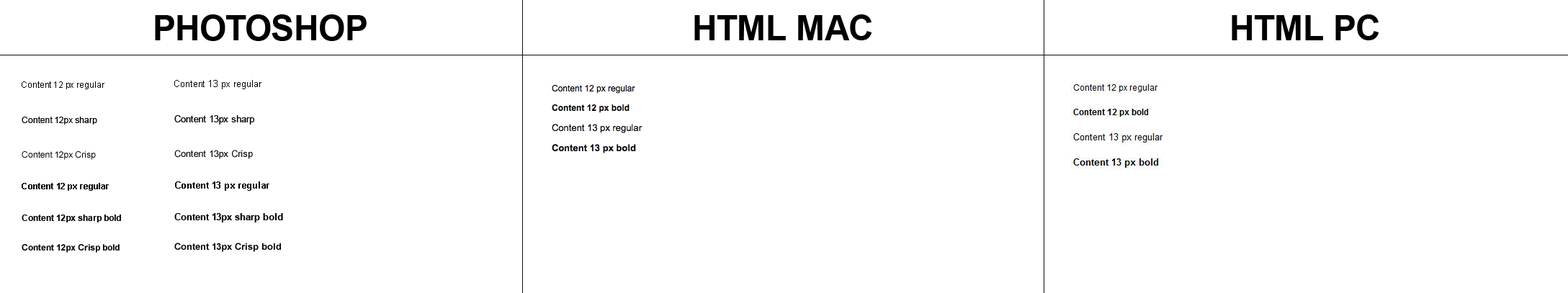
<style>
.page{position:relative;width:1568px;height:293px;background:#ffffff}
.page>*{position:absolute;margin:0}
.t1{font:34.6px "Arial-BoldMT";color:#000000}
.t2{font:8.6px "ArialMT";color:#000000}
.t3{font:9.4px "ArialMT";color:#000000}
.t4{font:8.6px "Arial-BoldMT";color:#000000}
.t5{font:9.4px "Arial-BoldMT";color:#000000}
</style>
<div class="page">
<p class="t1" style="left:155px;top:14px;width:212px;height:27px">PHOTOSHOP</p>
<p class="t1" style="left:694px;top:14px;width:178px;height:26px">HTML MAC</p>
<p class="t1" style="left:1232px;top:14px;width:147px;height:26px">HTML PC</p>
<p class="t2" style="left:22px;top:81px;width:82px;height:8px">Content 12 px regular</p>
<p class="t3" style="left:174px;top:80px;width:87px;height:9px">Content 13 px regular</p>
<p class="t2" style="left:22px;top:117px;width:75px;height:8px">Content 12px sharp</p>
<p class="t3" style="left:174px;top:115px;width:81px;height:10px">Content 13px sharp</p>
<p class="t3" style="left:174px;top:150px;width:79px;height:9px">Content 13px Crisp</p>
<p class="t2" style="left:22px;top:151px;width:74px;height:9px">Content 12px Crisp</p>
<p class="t4" style="left:22px;top:183px;width:87px;height:8px">Content 12 px regular</p>
<p class="t5" style="left:175px;top:182px;width:94px;height:9px">Content 13 px regular</p>
<p class="t4" style="left:22px;top:215px;width:99px;height:8px">Content 12px sharp bold</p>
<p class="t5" style="left:174px;top:213px;width:109px;height:10px">Content 13px sharp bold</p>
<p class="t4" style="left:22px;top:244px;width:98px;height:9px">Content 12px Crisp bold</p>
<p class="t5" style="left:174px;top:243px;width:107px;height:9px">Content 13px Crisp bold</p>
</div>
